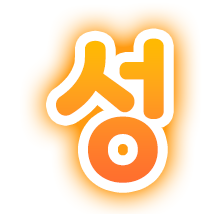
<style>
.page{position:relative;width:222px;height:214px;background:#ffffff}
.page>*{position:absolute;margin:0}
.t1{font:146.7px "Binggrae-Bold";text-transform:uppercase;scale:0.91 1}
</style>
<div class="page">
<p class="t1" style="left:56px;top:38px;width:108px;height:145px">성</p>
</div>
